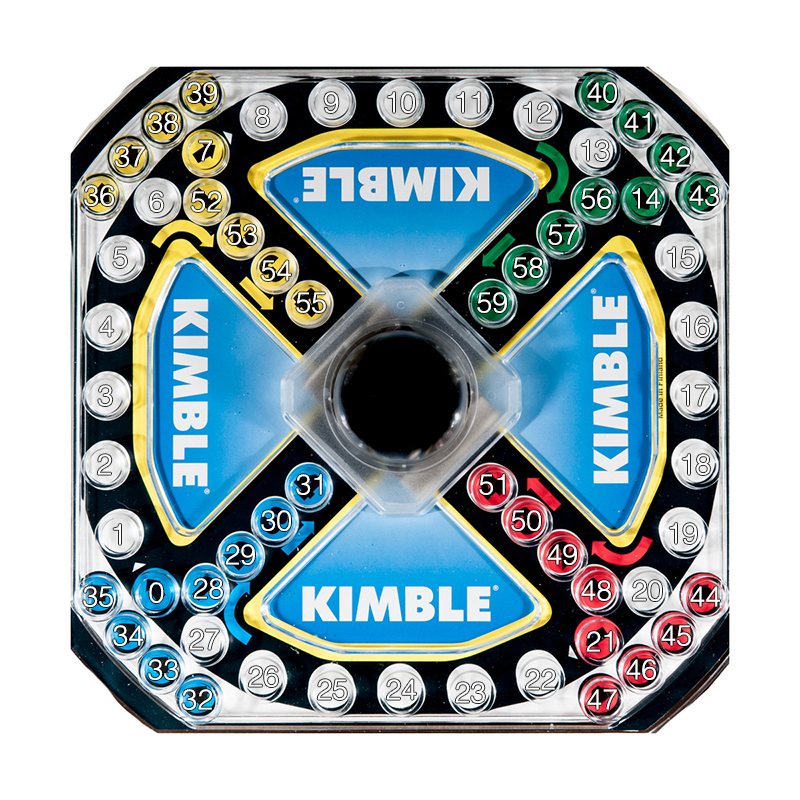
<style>
.page{position:relative;width:800px;height:800px;background:#ffffff}
.page>*{position:absolute;margin:0}
.t1{font:28.3px "Helvetica-Light";color:#ffffff}
</style>
<div class="page">
<p class="t1" style="left:187px;top:82px;width:30px;height:21px">39</p>
<p class="t1" style="left:587px;top:82px;width:30px;height:21px">40</p>
<p class="t1" style="left:324px;top:92px;width:15px;height:21px">9</p>
<p class="t1" style="left:387px;top:92px;width:28px;height:21px">10</p>
<p class="t1" style="left:456px;top:92px;width:24px;height:21px">11</p>
<p class="t1" style="left:523px;top:102px;width:28px;height:21px">12</p>
<p class="t1" style="left:148px;top:112px;width:30px;height:21px">38</p>
<p class="t1" style="left:255px;top:106px;width:15px;height:21px">8</p>
<p class="t1" style="left:624px;top:112px;width:26px;height:21px">41</p>
<p class="t1" style="left:115px;top:146px;width:30px;height:21px">37</p>
<p class="t1" style="left:199px;top:140px;width:13px;height:21px">7</p>
<p class="t1" style="left:581px;top:140px;width:28px;height:21px">13</p>
<p class="t1" style="left:660px;top:146px;width:30px;height:21px">42</p>
<p class="t1" style="left:84px;top:185px;width:30px;height:21px">36</p>
<p class="t1" style="left:689px;top:185px;width:30px;height:21px">43</p>
<p class="t1" style="left:149px;top:191px;width:15px;height:21px">6</p>
<p class="t1" style="left:191px;top:191px;width:30px;height:21px">52</p>
<p class="t1" style="left:581px;top:188px;width:30px;height:21px">56</p>
<p class="t1" style="left:632px;top:188px;width:28px;height:21px">14</p>
<p class="t1" style="left:227px;top:224px;width:30px;height:21px">53</p>
<p class="t1" style="left:548px;top:224px;width:30px;height:21px">57</p>
<p class="t1" style="left:113px;top:247px;width:14px;height:21px">5</p>
<p class="t1" style="left:513px;top:257px;width:30px;height:21px">58</p>
<p class="t1" style="left:667px;top:247px;width:28px;height:21px">15</p>
<p class="t1" style="left:261px;top:260px;width:30px;height:21px">54</p>
<p class="t1" style="left:296px;top:292px;width:30px;height:21px">55</p>
<p class="t1" style="left:477px;top:292px;width:30px;height:21px">59</p>
<p class="t1" style="left:99px;top:316px;width:15px;height:21px">4</p>
<p class="t1" style="left:681px;top:316px;width:28px;height:21px">16</p>
<p class="t1" style="left:98px;top:385px;width:15px;height:21px">3</p>
<p class="t1" style="left:97px;top:454px;width:15px;height:21px">2</p>
<p class="t1" style="left:682px;top:454px;width:28px;height:21px">18</p>
<p class="t1" style="left:296px;top:474px;width:26px;height:21px">31</p>
<p class="t1" style="left:479px;top:474px;width:26px;height:21px">51</p>
<p class="t1" style="left:261px;top:510px;width:30px;height:21px">30</p>
<p class="t1" style="left:511px;top:510px;width:30px;height:21px">50</p>
<p class="t1" style="left:113px;top:524px;width:8px;height:21px">1</p>
<p class="t1" style="left:669px;top:523px;width:28px;height:21px">19</p>
<p class="t1" style="left:225px;top:544px;width:30px;height:21px">29</p>
<p class="t1" style="left:547px;top:544px;width:30px;height:21px">49</p>
<p class="t1" style="left:149px;top:582px;width:15px;height:21px">0</p>
<p class="t1" style="left:193px;top:578px;width:30px;height:21px">28</p>
<p class="t1" style="left:581px;top:580px;width:30px;height:21px">48</p>
<p class="t1" style="left:632px;top:580px;width:30px;height:21px">20</p>
<p class="t1" style="left:83px;top:586px;width:30px;height:21px">35</p>
<p class="t1" style="left:690px;top:586px;width:30px;height:21px">44</p>
<p class="t1" style="left:113px;top:625px;width:30px;height:21px">34</p>
<p class="t1" style="left:661px;top:625px;width:30px;height:21px">45</p>
<p class="t1" style="left:586px;top:631px;width:26px;height:21px">21</p>
<p class="t1" style="left:148px;top:659px;width:30px;height:21px">33</p>
<p class="t1" style="left:626px;top:659px;width:30px;height:21px">46</p>
<p class="t1" style="left:248px;top:666px;width:30px;height:21px">26</p>
<p class="t1" style="left:525px;top:669px;width:30px;height:21px">22</p>
<p class="t1" style="left:182px;top:689px;width:30px;height:21px">32</p>
<p class="t1" style="left:317px;top:679px;width:30px;height:21px">25</p>
<p class="t1" style="left:386px;top:679px;width:30px;height:21px">24</p>
<p class="t1" style="left:455px;top:682px;width:30px;height:21px">23</p>
<p class="t1" style="left:587px;top:689px;width:30px;height:21px">47</p>
</div>
